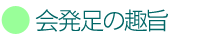
<style>
.page{position:relative;width:200px;height:40px;background:#ffffff}
.page>*{position:absolute;margin:0}
.t1{font:24px "FMotoyaCedar-W1-90mskp-RKSJ-H";color:#006666}
</style>
<div class="page">
<p class="t1" style="left:35px;top:9px;width:133px;height:23px">会発足の趣旨</p>
</div>
